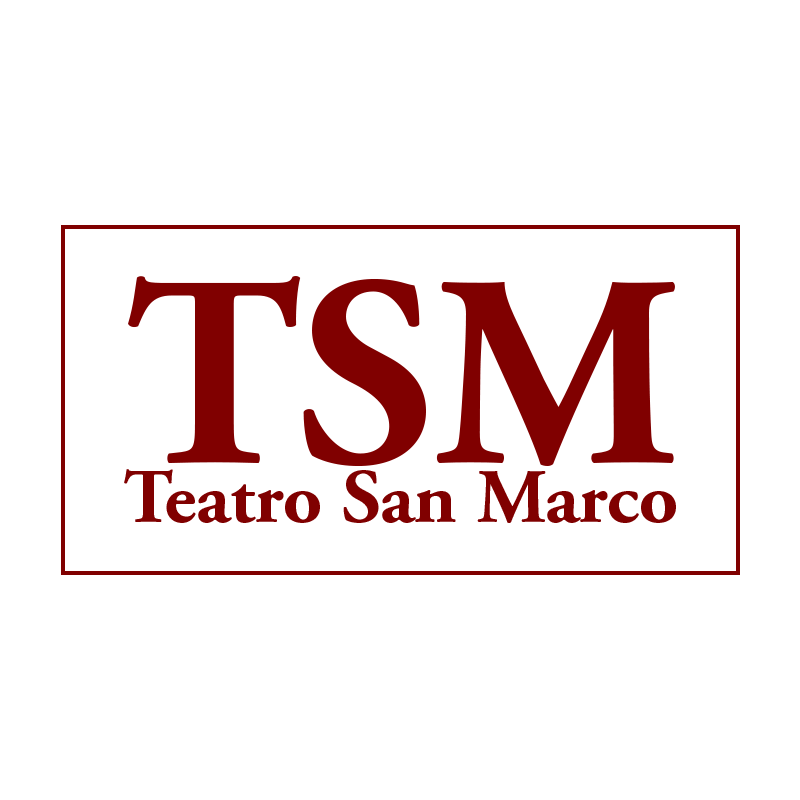
<style>
.page{position:relative;width:800px;height:800px;background:#ffffff}
.page>*{position:absolute;margin:0}
.t1{font:271px "AGaramond-Bold";color:#800000}
.t2{font:76.8px "AGaramond-Bold";color:#800000}
</style>
<div class="page">
<p class="t1" style="left:128px;top:276px;width:547px;height:190px">TSM</p>
<p class="t2" style="left:124px;top:469px;width:552px;height:54px">Teatro San Marco</p>
</div>
